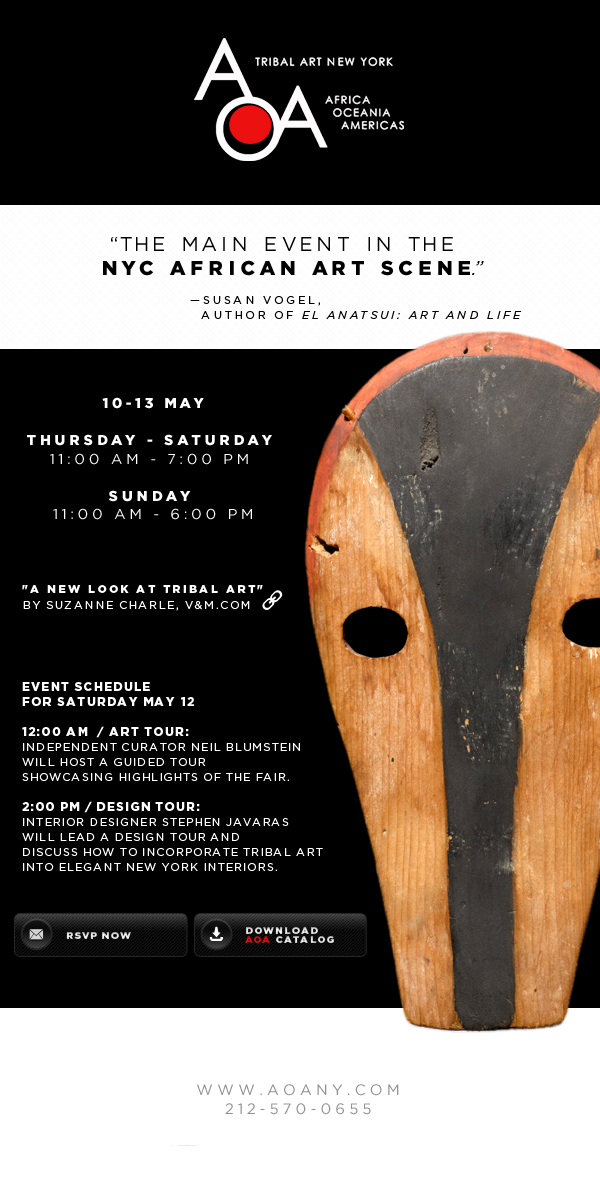
<style>
.page{position:relative;width:600px;height:1186px;background:#000000}
.page>*{position:absolute;margin:0}
.t1{font:20px/23.8px "GothamHTF-Book";letter-spacing:0.265em;color:#000000;text-transform:uppercase}
.t2{font:20px/23.8px "GothamHTF-Black";letter-spacing:0.265em;color:#000000;text-transform:uppercase}
.t3{font:20px/23.8px "GothamHTF-BookItalic";letter-spacing:0.265em;color:#000000;text-transform:uppercase}
.t4{font:11px/15.3px "GothamHTF-Book";letter-spacing:0.265em;color:#000000;text-transform:uppercase}
.t5{font:11px/15.3px "GothamHTF-BookItalic";letter-spacing:0.265em;color:#000000;text-transform:uppercase}
.t6{font:14.3px/18.5px "GothamHTF-Black";letter-spacing:0.265em;color:#ffffff;text-transform:uppercase}
.t7{font:14.3px/18.5px "GothamHTF-Book";letter-spacing:0.265em;color:#ffffff;text-transform:uppercase}
.t8{font:11px/15.3px "GothamHTF-Black";letter-spacing:0.225em;color:#ffffff;text-transform:uppercase}
.t9{font:11px/15.3px "GothamHTF-Book";letter-spacing:0.145em;color:#ffffff;text-transform:uppercase}
.t10{font:11px/15px "GothamHTF-Book";letter-spacing:0.105em;color:#ffffff;text-transform:uppercase}
.t11{font:12px/15px "GothamHTF-Black";letter-spacing:0.105em;color:#ffffff;text-transform:uppercase}
.t12{font:11px/15px "GothamHTF-Black";letter-spacing:0.105em;color:#ffffff;text-transform:uppercase}
.t13{font:9.8px/9.8px "GothamHTF-Black";letter-spacing:0.125em;text-transform:uppercase}
.t14{font:9.9px "GothamHTF-Black";letter-spacing:0.125em;color:#e8e8e8;text-transform:uppercase}
.t15{font:14.9px/19.3px "GothamHTF-Book";letter-spacing:0.265em;color:#8f8f8f;text-transform:uppercase}
</style>
<div class="page">
<p class="t1" style="left:103px;top:237px;width:381px;height:39px;text-align:center">“The Main Event in the<br>  <span class="t2">NYC African Art Scene</span><span class="t3">.”</span></p>
<p class="t4" style="left:190px;top:296px;width:331px;height:23px">—Susan Vogel, <br>  author of <span class="t5">El Anatsui: Art and Life</span></p>
<p class="t6" style="left:27px;top:397px;width:245px;height:123px;text-align:center">10-13 May<br><br>Thursday - Saturday <br><span class="t7">11:00 am - 7:00 pm <br><br></span>Sunday <br><span class="t7">11:00 am - 6:00 pm</span></p>
<p class="t8" style="left:22px;top:585px;width:241px;height:26px">"A New Look at Tribal Art" <br><span class="t9">by Suzanne Charle, V&amp;M.com</span></p>
<p class="t10" style="left:22px;top:682px;width:301px;height:189px"><span class="t11">Event Schedule <br>for Saturday May 12 <br><br>12:00 AM  / Art Tour: <br></span>Independent curator Neil Blumstein <br>will host a guided tour <br>showcasing highlights of the fair. <br><br><span class="t11">2:00 PM / Design Tour: <br></span>Interior Designer Stephen Javaras <br>will lead a design tour and<span class="t12"> <br></span>discuss how to incorporate Tribal Art <br>into elegant New York interiors.</p>
<p class="t13" style="left:245px;top:927px;width:89px;height:16px">DownLOAD <br>AOA CATALOG</p>
<p class="t14" style="left:66px;top:932px;width:65px;height:7px">RSVP NOW</p>
<p class="t15" style="left:197px;top:1084px;width:202px;height:31px;text-align:center">www.aoany.com<br>212-570-0655</p>
</div>
